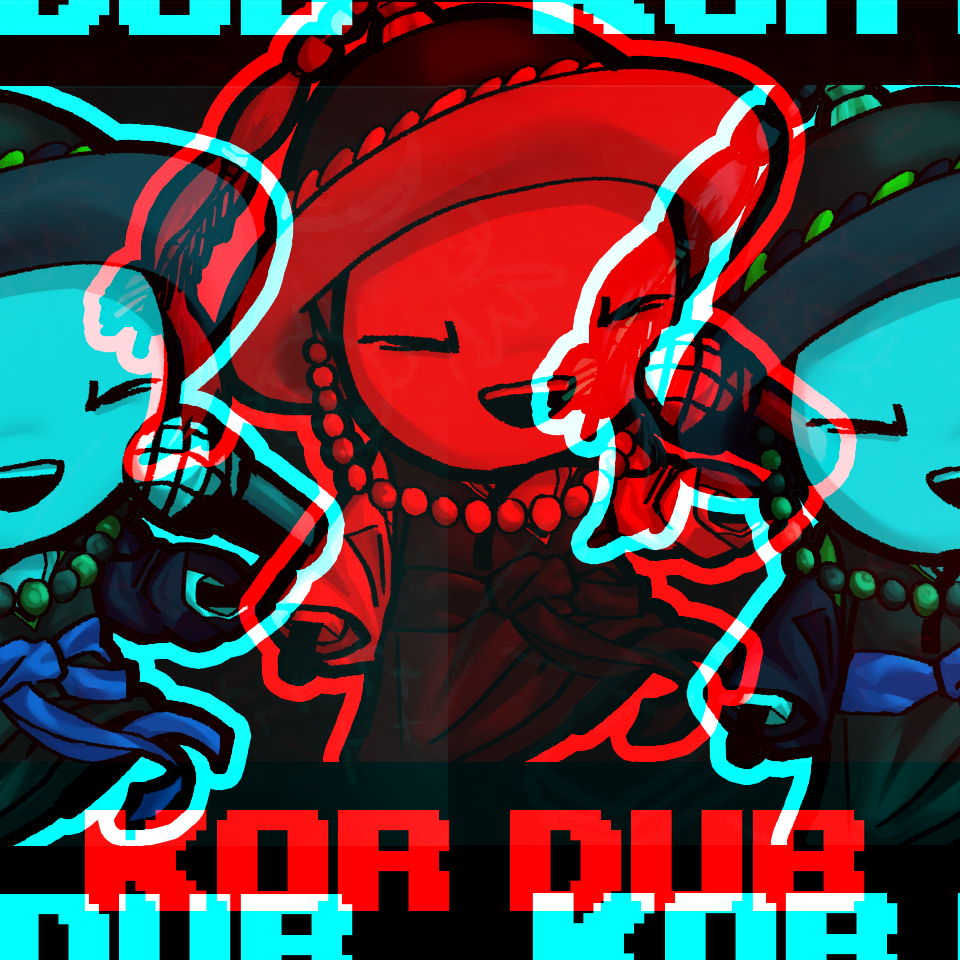
<style>
.page{position:relative;width:960px;height:960px}
.page>*{position:absolute;margin:0}
.t1{font:202.2px "UpheavalTT-BRK-";color:#ff0000}
</style>
<div class="page">
<p class="t1" style="left:84px;top:808px;width:781px;height:101px">KOR DUB</p>
</div>
